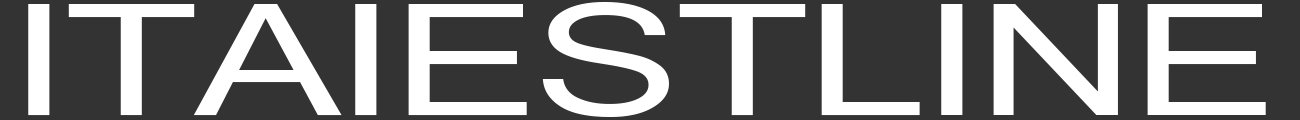
<style>
.page{position:relative;width:1300px;height:120px;background:#333333}
.page>*{position:absolute;margin:0}
.t1{font:154.5px "MicrosoftSansSerif";letter-spacing:-0.025em;color:#ffffff;scale:1.43 1}
</style>
<div class="page">
<p class="t1" style="left:28px;top:2px;width:1238px;height:115px">ITAIESTLINE</p>
</div>
